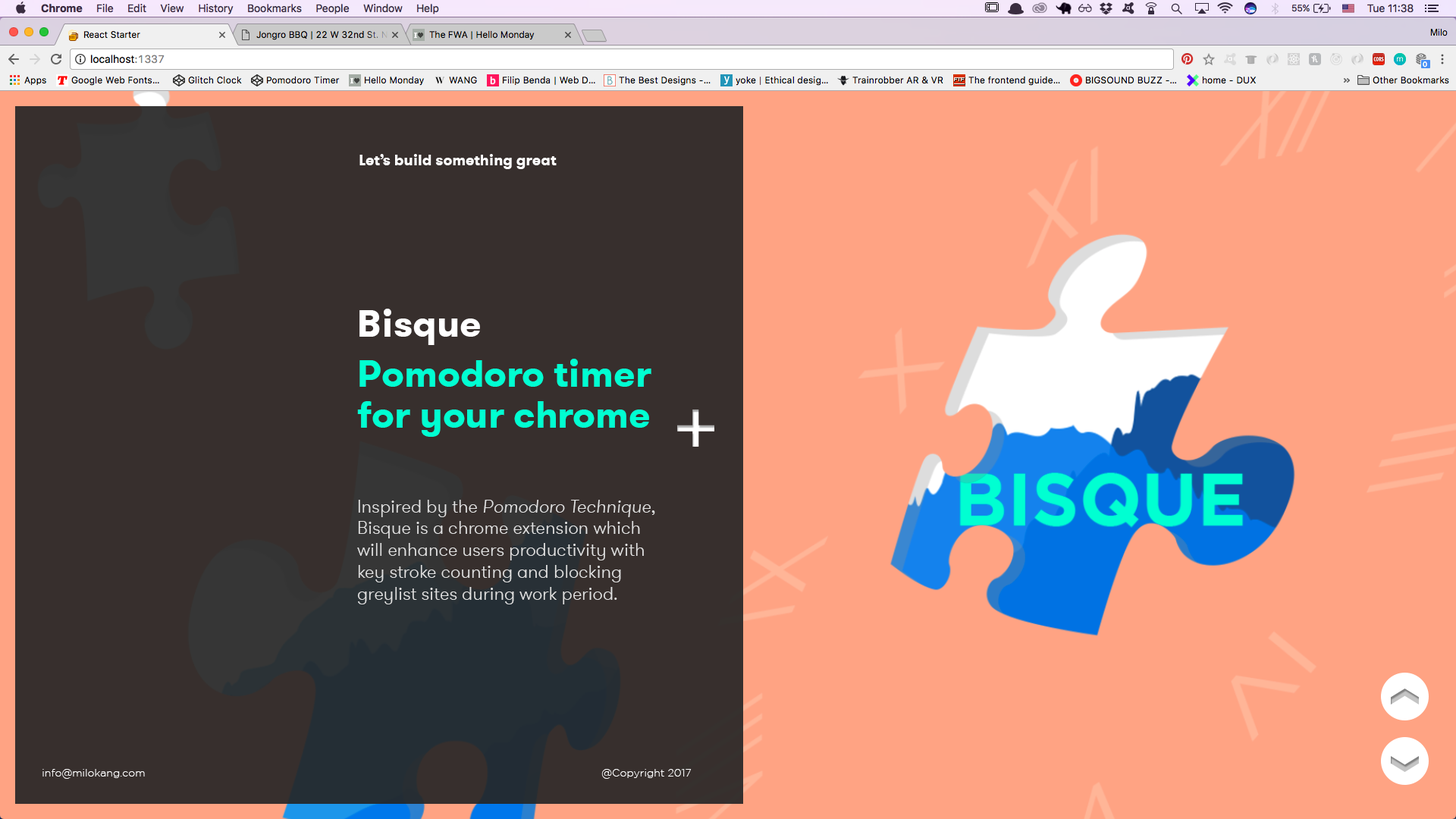
<style>
.page{position:relative;width:1456px;height:819px;background:#ffa383}
.page>*{position:absolute;margin:0}
.t1{font:15.2px "GTWalsheim-Bold";color:#ffffff}
.t2{font:37.9px "GTWalsheim-Bold";color:#ffffff}
.t3{font:37.9px/40.9px "GTWalsheim-Bold";color:#00ffd2}
.t4{font:18.2px "GTWalsheim-Light";color:#e1e1e1}
.t5{font:18.2px "GTWalsheim-LightOblique";color:#e1e1e1}
.t6{font:10.6px "GothamLight";color:#ffffff}
</style>
<div class="page">
<p class="t1" style="left:359px;top:154px;width:198px;height:15px">Let’s build something great</p>
<p class="t2" style="left:359px;top:309px;width:121px;height:36px">Bisque</p>
<p class="t3" style="left:357px;top:359px;width:294px;height:78px">Pomodoro timer<br>for your chrome</p>
<p class="t4" style="left:357px;top:500px;width:298px;height:104px">Inspired by the <span class="t5">Pomodoro Technique</span>, Bisque is a chrome extension which will enhance users productivity with key stroke counting and blocking greylist sites during work period.</p>
<p class="t6" style="left:42px;top:769px;width:103px;height:10px">info@milokang.com</p>
<p class="t6" style="left:601px;top:769px;width:91px;height:10px">@Copyright 2017</p>
</div>
